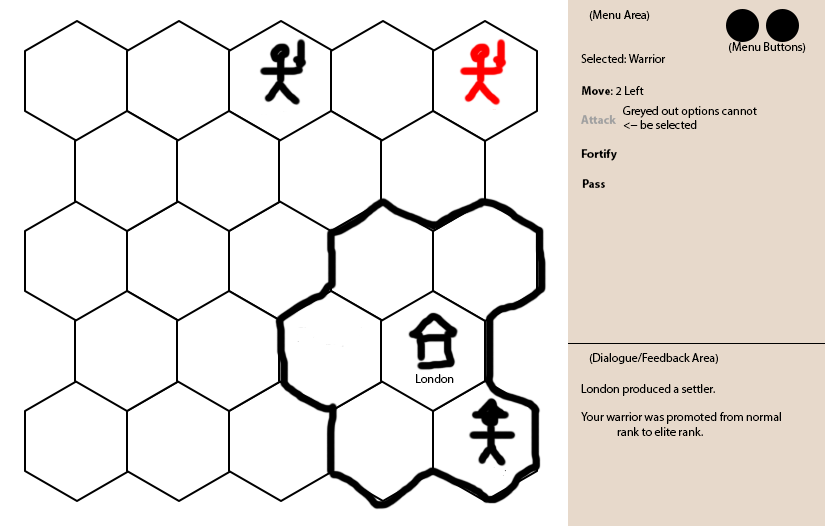
<style>
.page{position:relative;width:825px;height:526px;background:#ffffff}
.page>*{position:absolute;margin:0}
.t1{font:12px "MyriadPro-Regular";color:#000000}
.t2{font:12px "MyriadPro-Bold";color:#000000}
.t3{font:12px "MyriadPro-Bold";color:#a1a1a1}
</style>
<div class="page">
<p class="t1" style="left:589px;top:10px;width:61px;height:11px">(Menu Area)</p>
<p class="t1" style="left:581px;top:54px;width:85px;height:9px">Selected: Warrior</p>
<p class="t1" style="left:729px;top:42px;width:77px;height:11px">(Menu Buttons)</p>
<p class="t1" style="left:581px;top:86px;width:63px;height:9px"><span class="t2">Move</span>: 2 Left</p>
<p class="t1" style="left:623px;top:106px;width:134px;height:23px">Greyed out options cannot &lt;-- be selected</p>
<p class="t3" style="left:581px;top:115px;width:35px;height:9px">Attack</p>
<p class="t2" style="left:581px;top:149px;width:36px;height:12px">Fortify</p>
<p class="t2" style="left:582px;top:179px;width:23px;height:9px">Pass</p>
<p class="t1" style="left:589px;top:353px;width:129px;height:11px">(Dialogue/Feedback Area)</p>
<p class="t1" style="left:416px;top:374px;width:38px;height:9px">London</p>
<p class="t1" style="left:581px;top:384px;width:200px;height:52px">London produced a settler.<br><br>Your warrior was promoted from normal    rank to elite rank.</p>
</div>
